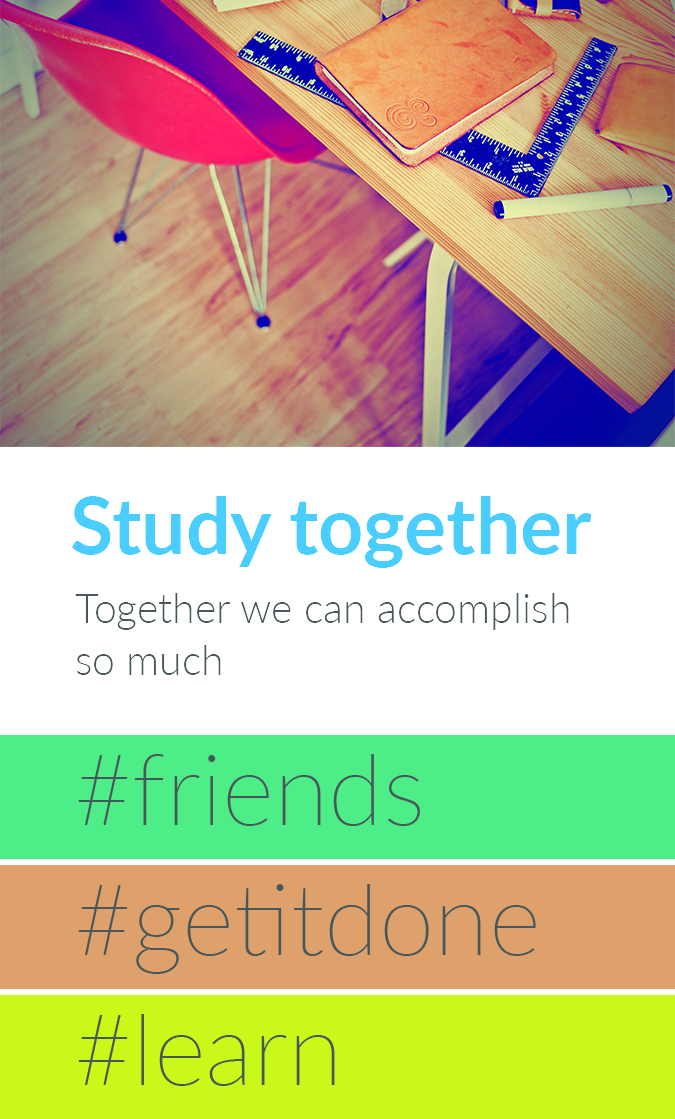
<style>
.page{position:relative;width:675px;height:1119px;background:#ffffff}
.page>*{position:absolute;margin:0}
.t1{font:79px "Lato-Bold";color:#4acdff}
.t2{font:41px/52px "Lato-Light";color:#48585a}
</style>
<div class="page">
<p class="t1" style="left:71px;top:496px;width:521px;height:72px">Study together</p>
<p class="t2" style="left:75px;top:593px;width:494px;height:82px;text-align:right">Together we can accomplish so much</p>
</div>
